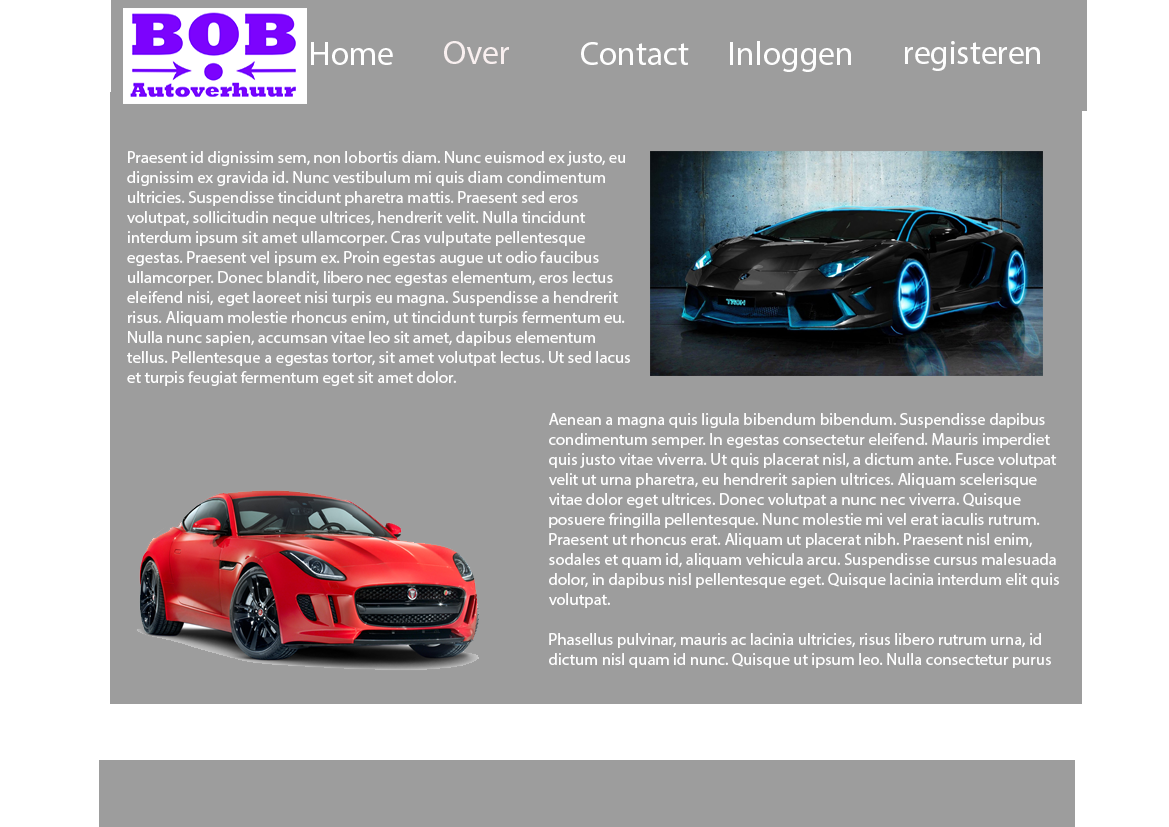
<style>
.page{position:relative;width:1169px;height:827px;background:#9d9d9d}
.page>*{position:absolute;margin:0}
.t1{font:33.3px "MyriadPro-Regular";color:#f9f0f0}
.t2{font:33.3px "MyriadPro-Regular";color:#fefefe}
.t3{font:33.3px "MyriadPro-Regular";color:#ffffff}
.t4{font:16.7px "MyriadPro-Regular";color:#fefefe}
.t5{font:12px "MyriadPro-Regular";color:#fefefe}
</style>
<div class="page">
<p class="t1" style="left:444px;top:41px;width:65px;height:23px">Over</p>
<p class="t2" style="left:730px;top:41px;width:121px;height:31px">Inloggen</p>
<p class="t2" style="left:905px;top:41px;width:135px;height:30px">registeren</p>
<p class="t3" style="left:311px;top:42px;width:82px;height:23px">Home</p>
<p class="t2" style="left:581px;top:42px;width:108px;height:23px">Contact</p>
<p class="t4" style="left:127px;top:151px;width:503px;height:235px">Praesent id dignissim sem, non lobortis diam. Nunc euismod ex justo, eu dignissim ex gravida id. Nunc vestibulum mi quis diam condimentum ultricies. Suspendisse tincidunt pharetra mattis. Praesent sed eros volutpat, sollicitudin neque ultrices, hendrerit velit. Nulla tincidunt interdum ipsum sit amet ullamcorper. Cras vulputate pellentesque egestas. Praesent vel ipsum ex. Proin egestas augue ut odio faucibus ullamcorper. Donec blandit, libero nec egestas elementum, eros lectus eleifend nisi, eget laoreet nisi turpis eu magna. Suspendisse a hendrerit risus. Aliquam molestie rhoncus enim, ut tincidunt turpis fermentum eu. Nulla nunc sapien, accumsan vitae leo sit amet, dapibus elementum tellus. Pellentesque a egestas tortor, sit amet volutpat lectus. Ut sed lacus et turpis feugiat fermentum eget sit amet dolor.</p>
<p class="t5" style="left:549px;top:413px;width:510px;height:255px">Aenean a magna quis ligula bibendum bibendum. Suspendisse dapibus condimentum semper. In egestas consectetur eleifend. Mauris imperdiet quis justo vitae viverra. Ut quis placerat nisl, a dictum ante. Fusce volutpat velit ut urna pharetra, eu hendrerit sapien ultrices. Aliquam scelerisque vitae dolor eget ultrices. Donec volutpat a nunc nec viverra. Quisque posuere fringilla pellentesque. Nunc molestie mi vel erat iaculis rutrum. Praesent ut rhoncus erat. Aliquam ut placerat nibh. Praesent nisl enim, sodales et quam id, aliquam vehicula arcu. Suspendisse cursus malesuada dolor, in dapibus nisl pellentesque eget. Quisque lacinia interdum elit quis volutpat.<br><br>Phasellus pulvinar, mauris ac lacinia ultricies, risus libero rutrum urna, id dictum nisl quam id nunc. Quisque ut ipsum leo. Nulla consectetur purus augue, sed mattis est elementum et. Sed convallis rhoncus faucibus. Fusce rhoncus, neque eu porta elementum, tortor diam imperdiet leo, eu ornare dolor arcu vitae diam. Suspendisse potenti. Nullam metus elit, vulputate vel orci vitae, aliquet sollicitudin ex. Maecenas aliquet accumsan sapien. Ut laoreet eros eu dolor sodales lobortis. Aenean ut tempor urna.</p>
</div>
